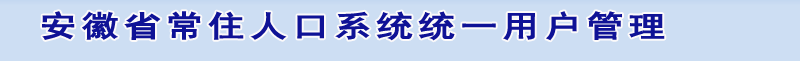
<style>
.page{position:relative;width:800px;height:61px;background:#cddef3}
.page>*{position:absolute;margin:0}
.t1{font:30px "SimHei";letter-spacing:0.1em;color:#0f1296;font-weight:bold;scale:1.24 1}
</style>
<div class="page">
<p class="t1" style="left:42px;top:11px;width:623px;height:30px">安徽省常住人口系统统一用户管理</p>
</div>
